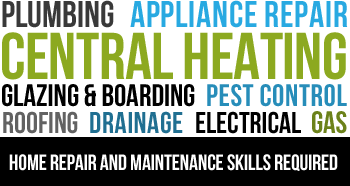
<style>
.page{position:relative;width:350px;height:186px;background:#ffffff}
.page>*{position:absolute;margin:0}
.t1{font:37px "BebasNeue";color:#393939}
.t2{font:37px "BebasNeue";letter-spacing:0.02em;color:#28a9e1}
.t3{font:66px "BebasNeue";letter-spacing:-0.01em;color:#8daa21}
.t4{font:31px "BebasNeue";color:#000000}
.t5{font:31px "BebasNeue";letter-spacing:0.02em;color:#278db9}
.t6{font:30px "BebasNeue";color:#626262}
.t7{font:30px "BebasNeue";letter-spacing:0.02em;color:#206f91}
.t8{font:30px "BebasNeue";color:#000000}
.t9{font:31px "BebasNeue";color:#6c821a}
.t10{font:22px "BebasNeue";letter-spacing:-0.005em;color:#ffffff}
</style>
<div class="page">
<p class="t1" style="left:2px;top:0px;width:112px;height:28px">Plumbing</p>
<p class="t2" style="left:130px;top:0px;width:218px;height:28px">Appliance Repair</p>
<p class="t3" style="left:2px;top:32px;width:344px;height:48px">Central heating</p>
<p class="t4" style="left:2px;top:84px;width:193px;height:23px">Glazing &amp; Boarding</p>
<p class="t5" style="left:207px;top:84px;width:140px;height:23px">Pest control</p>
<p class="t6" style="left:3px;top:111px;width:75px;height:23px">Roofing</p>
<p class="t7" style="left:90px;top:111px;width:93px;height:23px">Drainage</p>
<p class="t8" style="left:196px;top:111px;width:105px;height:23px">Electrical</p>
<p class="t9" style="left:312px;top:111px;width:35px;height:23px">GAS</p>
<p class="t10" style="left:9px;top:154px;width:329px;height:17px">home repair and maintenance skills required</p>
</div>
